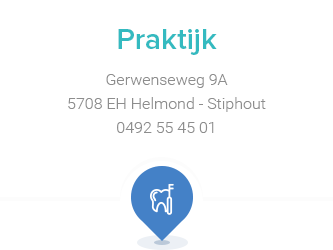
<style>
.page{position:relative;width:333px;height:250px;background:#ffffff}
.page>*{position:absolute;margin:0}
.t1{font:30px "ProximaNova-Semibold";color:#34bac0}
.t2{font:16px "Roboto-Light";color:#8d8d8d}
</style>
<div class="page">
<p class="t1" style="left:118px;top:29px;width:99px;height:26px">Praktijk</p>
<p class="t2" style="left:106px;top:74px;width:122px;height:14px">Gerwenseweg 9A</p>
<p class="t2" style="left:68px;top:97px;width:198px;height:15px">5708 EH Helmond - Stiphout</p>
<p class="t2" style="left:117px;top:122px;width:97px;height:11px">0492 55 45 01</p>
</div>
